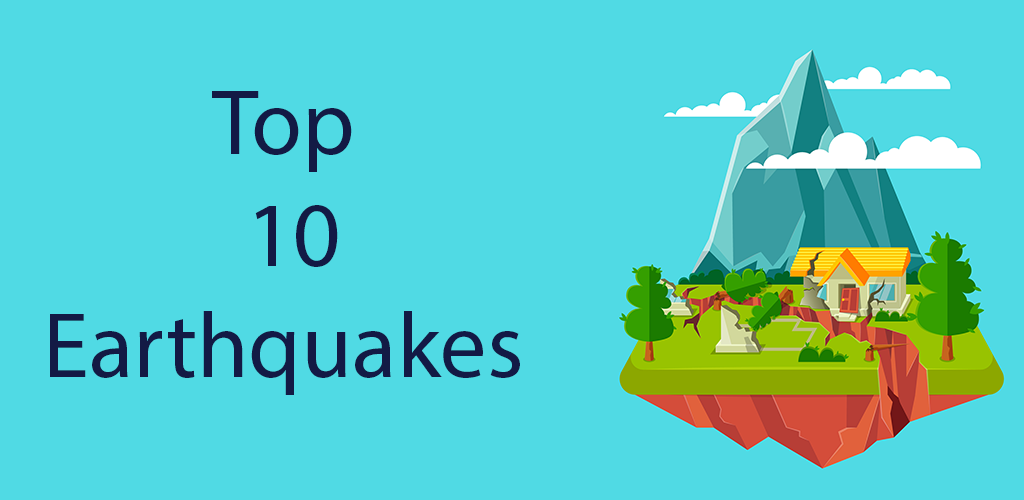
<style>
.page{position:relative;width:1024px;height:500px;background:#50dae4}
.page>*{position:absolute;margin:0}
.t1{font:93px "MyriadPro-Regular";color:#131a45}
</style>
<div class="page">
<p class="t1" style="left:50px;top:91px;width:470px;height:304px;text-align:center">Top<br> 10<br>Earthquakes</p>
</div>
